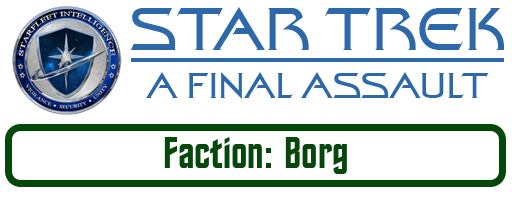
<style>
.page{position:relative;width:512px;height:200px;background:#ffffff}
.page>*{position:absolute;margin:0}
.t1{font:60px "StarTrekFilmBT-Regular";color:#2d68a9}
.t2{font:36px "StarTrekFilmBT-Regular";color:#2d68a9}
.t3{font:44px "StarTrekBT-Regular";color:#06470c}
</style>
<div class="page">
<p class="t1" style="left:131px;top:7px;width:373px;height:43px">STAR TREK</p>
<p class="t2" style="left:146px;top:72px;width:343px;height:27px">A FINAL ASSAULT</p>
<p class="t3" style="left:164px;top:137px;width:183px;height:37px">Faction: Borg</p>
</div>
